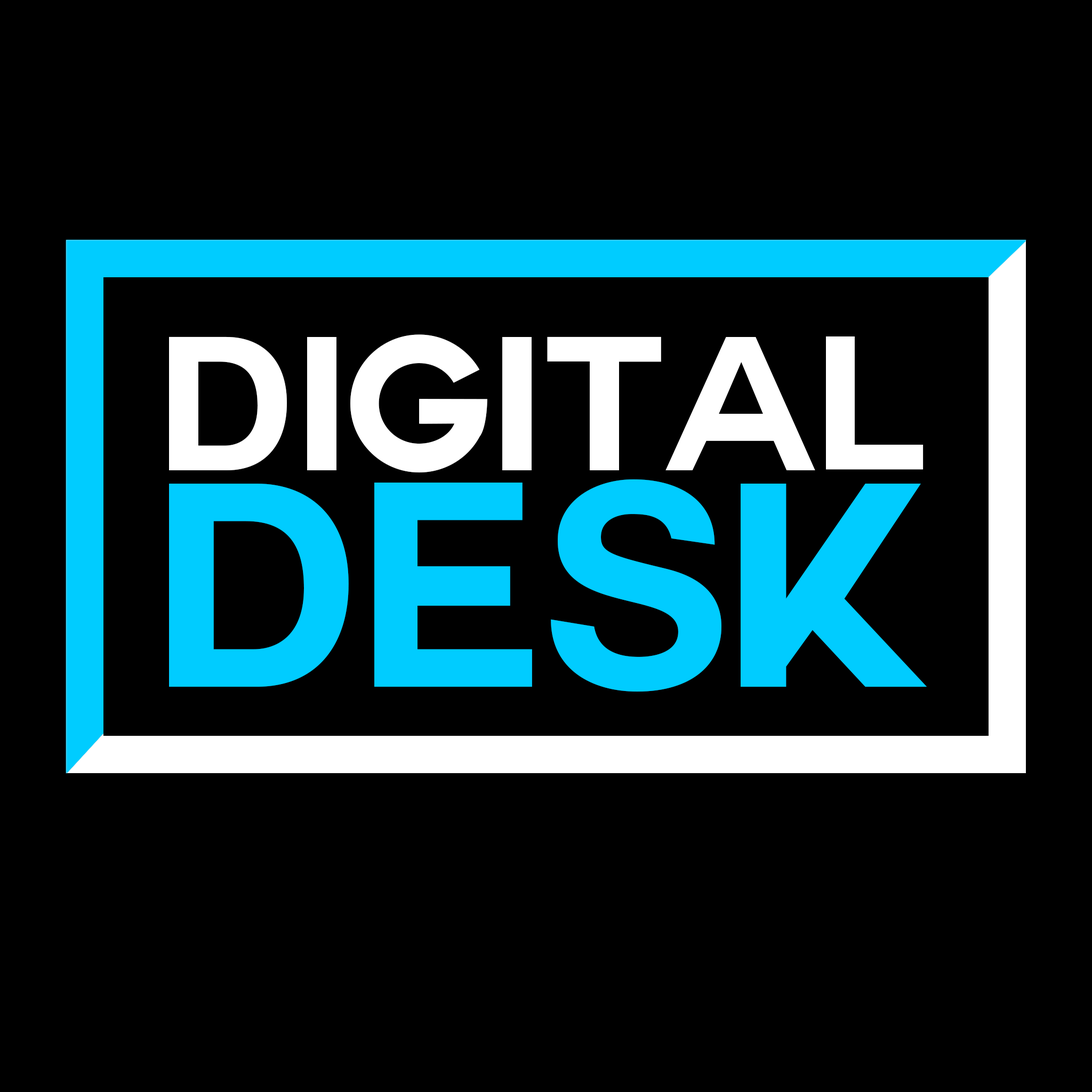
<style>
.page{position:relative;width:1092px;height:1092px;background:#000000}
.page>*{position:absolute;margin:0}
.t1{font:186.6px "Couture-Bold";color:#ffffff}
.t2{font:284.2px "Couture-Bold";color:#00ccff}
</style>
<div class="page">
<p class="t1" style="left:169px;top:334px;width:754px;height:139px">Digital</p>
<p class="t2" style="left:169px;top:479px;width:758px;height:213px">DESK</p>
</div>
